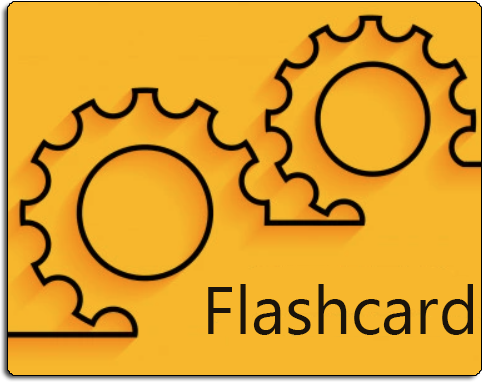
<style>
.page{position:relative;width:484px;height:383px;background:#f7b72d}
.page>*{position:absolute;margin:0}
.t1{font:66.7px "MicrosoftTaiLe";color:#19130b}
</style>
<div class="page">
<p class="t1" style="left:208px;top:284px;width:265px;height:51px">Flashcard</p>
</div>
